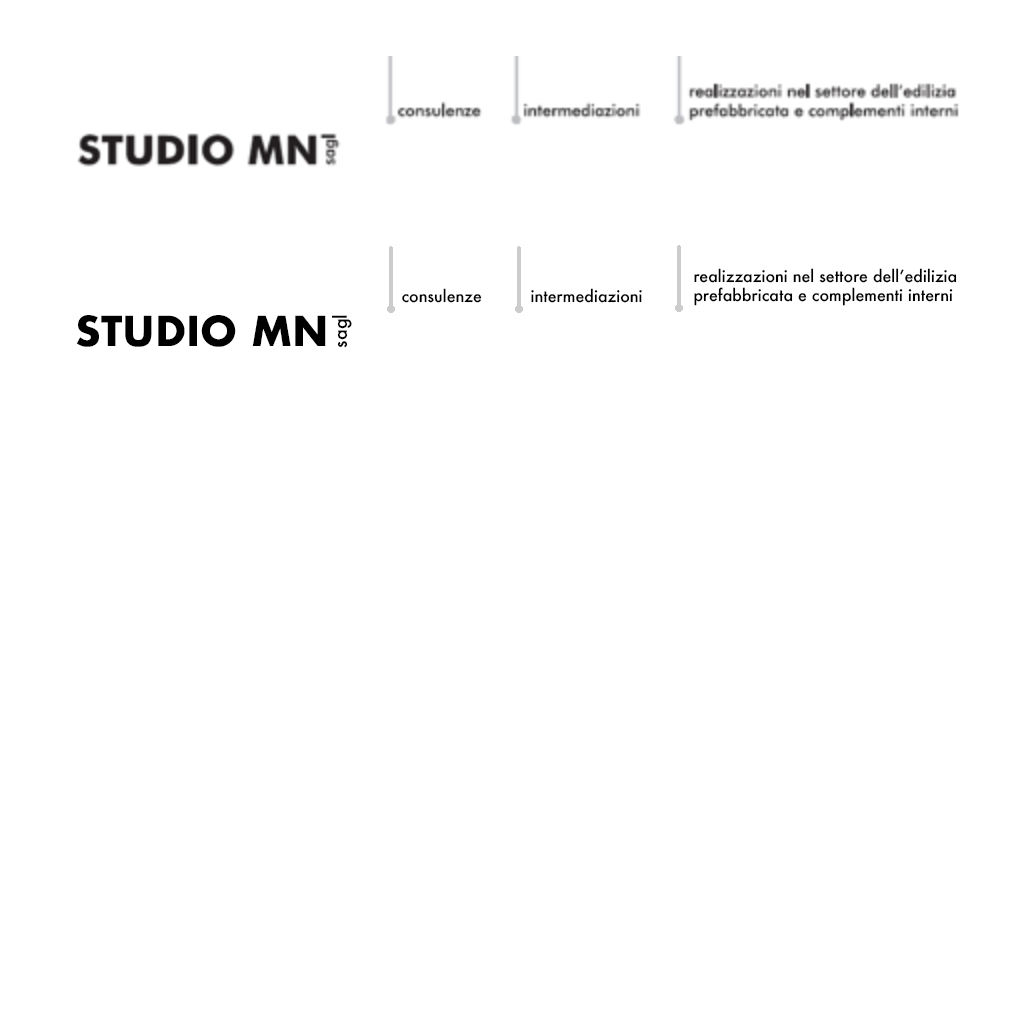
<style>
.page{position:relative;width:1024px;height:1024px;background:#ffffff}
.page>*{position:absolute;margin:0}
.t1{font:16px "Futura-Medium";color:#000000}
.t2{font:40px "Futura-Bold";color:#000000}
.t3{font:18px "Futura-Medium";color:#000000}
</style>
<div class="page">
<p class="t1" style="left:694px;top:268px;width:263px;height:38px">realizzazioni nel settore dell’edilizia<br>prefabbricata e complementi interni</p>
<p class="t1" style="left:402px;top:288px;width:80px;height:15px">consulenze</p>
<p class="t1" style="left:531px;top:288px;width:111px;height:15px">intermediazioni</p>
<p class="t2" style="left:76px;top:315px;width:250px;height:32px">STUDIO MN</p>
<p class="t3" style="left:331px;top:315px;width:21px;height:33px;rotate:-90deg">sagl</p>
</div>
